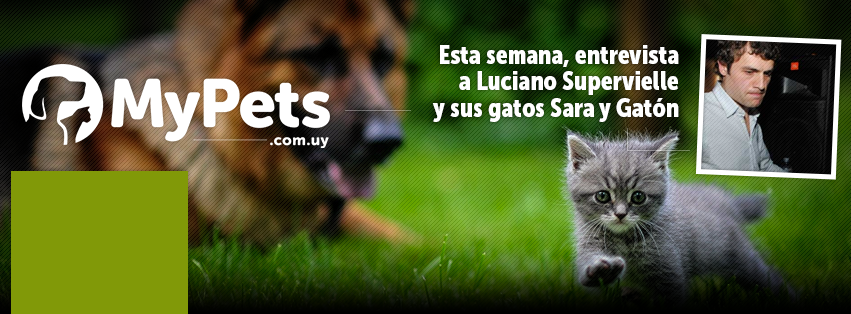
<style>
.page{position:relative;width:851px;height:314px}
.page>*{position:absolute;margin:0}
.t1{font:26.3px/26.3px "MuseoSansCond-900";color:#ffffff}
</style>
<div class="page">
<p class="t1" style="left:432px;top:45px;width:247px;height:77px;text-align:right">Esta semana, entrevista<br>a Luciano Supervielle<br>y sus gatos Sara y Gatón</p>
</div>
